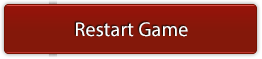
<style>
.page{position:relative;width:262px;height:59px;background:#84180a}
.page>*{position:absolute;margin:0}
.t1{font:20px "MyriadPro-Regular";letter-spacing:0.01em;color:#ffffff}
</style>
<div class="page">
<p class="t1" style="left:76px;top:22px;width:112px;height:15px">Restart Game</p>
</div>
